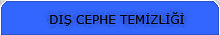
<style>
.page{position:relative;width:220px;height:35px;background:#3366ff}
.page>*{position:absolute;margin:0}
.t1{font:12px "Verdana";color:#000000}
</style>
<div class="page">
<p class="t1" style="left:50px;top:12px;width:134px;height:14px">DIŞ CEPHE TEMİZLİĞİ</p>
</div>
